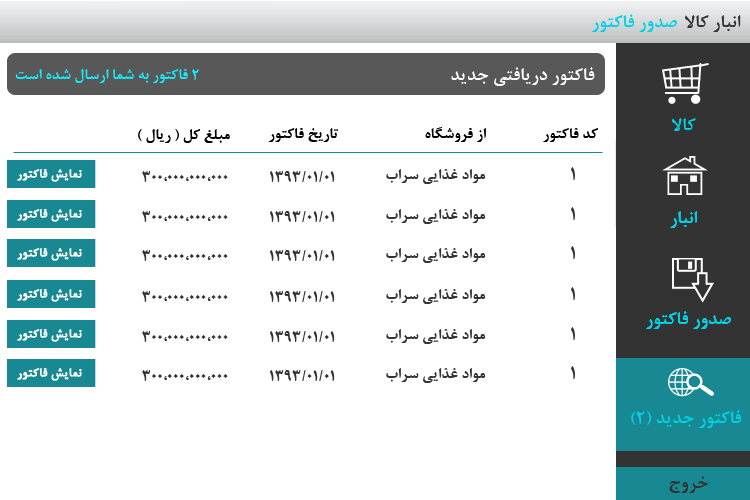
<style>
.page{position:relative;width:750px;height:500px;background:#ffffff}
.page>*{position:absolute;margin:0}
.t1{font:20px "BNazaninBold";color:#00d2e5}
.t2{font:20px "BNazaninBold";color:#333333}
.t3{font:16.7px "BNazaninBold";color:#1ae6f8}
.t4{font:20px "BNazaninBold";color:#ffffff}
.t5{font:16.7px "BNazaninBold";color:#000000}
.t6{font:13.3px "BNazaninBold";color:#ffffff;font-weight:bold}
.t7{font:16.7px "BNazaninBold";color:#333333}
</style>
<div class="page">
<p class="t1" style="left:592px;top:14px;width:85px;height:18px">صدور فاکتور</p>
<p class="t2" style="left:685px;top:15px;width:56px;height:17px">انبار کالا</p>
<p class="t3" style="left:15px;top:69px;width:184px;height:14px">2 فاکتور به شما ارسال شده است</p>
<p class="t4" style="left:451px;top:67px;width:144px;height:19px">فاکتور دریافتی جدید</p>
<p class="t1" style="left:672px;top:118px;width:24px;height:13px">کالا</p>
<p class="t5" style="left:138px;top:129px;width:92px;height:14px">مبلغ کل ( ریال )</p>
<p class="t5" style="left:268px;top:128px;width:71px;height:14px">تاریخ فاکتور</p>
<p class="t5" style="left:425px;top:127px;width:61px;height:15px">از فروشگاه</p>
<p class="t5" style="left:543px;top:128px;width:55px;height:14px">کد فاکتور</p>
<p class="t6" style="left:17px;top:169px;width:65px;height:13px">نمایش فاکتور</p>
<p class="t7" style="left:142px;top:171px;width:86px;height:11px">300،000،000،000</p>
<p class="t7" style="left:269px;top:171px;width:66px;height:11px">01/01/1393</p>
<p class="t7" style="left:386px;top:169px;width:100px;height:15px">مواد غذایی سراب</p>
<p class="t2" style="left:571px;top:167px;width:4px;height:13px">1</p>
<p class="t6" style="left:17px;top:209px;width:65px;height:13px">نمایش فاکتور</p>
<p class="t7" style="left:386px;top:209px;width:100px;height:15px">مواد غذایی سراب</p>
<p class="t2" style="left:571px;top:207px;width:4px;height:13px">1</p>
<p class="t7" style="left:142px;top:211px;width:86px;height:11px">300،000،000،000</p>
<p class="t7" style="left:269px;top:211px;width:66px;height:11px">01/01/1393</p>
<p class="t1" style="left:670px;top:211px;width:27px;height:17px">انبار</p>
<p class="t1" style="left:670px;top:211px;width:27px;height:17px">انبار</p>
<p class="t2" style="left:571px;top:246px;width:4px;height:13px">1</p>
<p class="t6" style="left:17px;top:248px;width:65px;height:13px">نمایش فاکتور</p>
<p class="t7" style="left:142px;top:250px;width:86px;height:11px">300،000،000،000</p>
<p class="t7" style="left:269px;top:250px;width:66px;height:11px">01/01/1393</p>
<p class="t7" style="left:386px;top:248px;width:100px;height:15px">مواد غذایی سراب</p>
<p class="t6" style="left:17px;top:289px;width:65px;height:13px">نمایش فاکتور</p>
<p class="t7" style="left:142px;top:291px;width:86px;height:11px">300،000،000،000</p>
<p class="t7" style="left:269px;top:291px;width:66px;height:11px">01/01/1393</p>
<p class="t7" style="left:386px;top:289px;width:100px;height:15px">مواد غذایی سراب</p>
<p class="t2" style="left:571px;top:287px;width:4px;height:13px">1</p>
<p class="t1" style="left:646px;top:311px;width:85px;height:18px">صدور فاکتور</p>
<p class="t1" style="left:646px;top:311px;width:85px;height:18px">صدور فاکتور</p>
<p class="t6" style="left:17px;top:329px;width:65px;height:13px">نمایش فاکتور</p>
<p class="t7" style="left:386px;top:329px;width:100px;height:15px">مواد غذایی سراب</p>
<p class="t2" style="left:571px;top:327px;width:4px;height:13px">1</p>
<p class="t7" style="left:142px;top:331px;width:86px;height:11px">300،000،000،000</p>
<p class="t7" style="left:269px;top:331px;width:66px;height:11px">01/01/1393</p>
<p class="t2" style="left:571px;top:366px;width:4px;height:13px">1</p>
<p class="t6" style="left:17px;top:368px;width:65px;height:13px">نمایش فاکتور</p>
<p class="t7" style="left:142px;top:370px;width:86px;height:11px">300،000،000،000</p>
<p class="t7" style="left:269px;top:370px;width:66px;height:11px">01/01/1393</p>
<p class="t7" style="left:386px;top:368px;width:100px;height:15px">مواد غذایی سراب</p>
<p class="t1" style="left:631px;top:410px;width:110px;height:18px">فاکتور جدید (2)</p>
<p class="t2" style="left:669px;top:476px;width:39px;height:17px">خروج</p>
</div>
